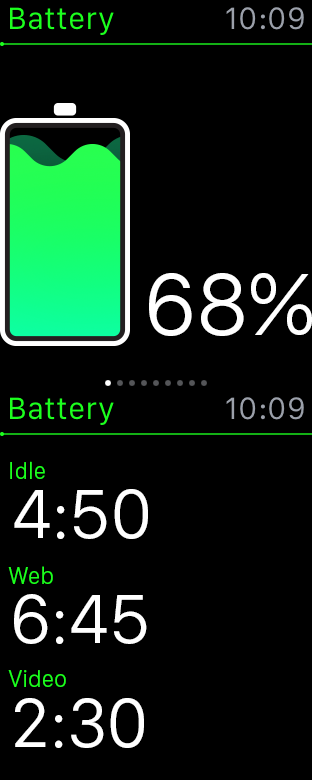
<style>
.page{position:relative;width:312px;height:780px;background:#000000}
.page>*{position:absolute;margin:0}
.t1{font:32px "SanFranciscoText-Regular";color:#1cff1e}
.t2{font:32px "SanFranciscoText-Regular";color:#9ba0aa}
.t3{font:92px "SanFranciscoDisplay-Regular";color:#ffffff}
.t4{font:24px "SanFranciscoDisplay-Light";color:#1cff1e}
.t5{font:72px "SanFranciscoDisplay-Regular";color:#ffffff}
</style>
<div class="page">
<p class="t1" style="left:10px;top:7px;width:104px;height:28px">Battery</p>
<p class="t2" style="left:226px;top:7px;width:78px;height:23px">10:09</p>
<p class="t3" style="left:149px;top:273px;width:163px;height:63px">68%</p>
<p class="t1" style="left:10px;top:397px;width:104px;height:28px">Battery</p>
<p class="t2" style="left:226px;top:397px;width:78px;height:23px">10:09</p>
<p class="t4" style="left:10px;top:461px;width:35px;height:18px">Idle</p>
<p class="t5" style="left:14px;top:489px;width:134px;height:50px">4:50</p>
<p class="t4" style="left:8px;top:566px;width:45px;height:18px">Web</p>
<p class="t5" style="left:14px;top:594px;width:133px;height:50px">6:45</p>
<p class="t4" style="left:8px;top:670px;width:58px;height:17px">Video</p>
<p class="t5" style="left:15px;top:698px;width:129px;height:50px">2:30</p>
</div>
